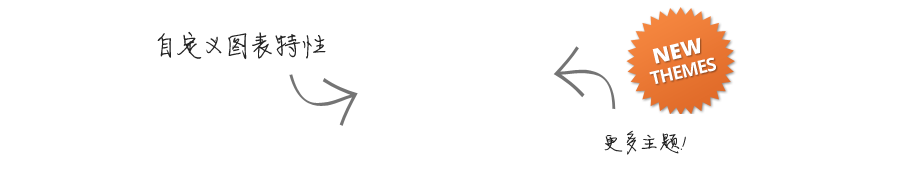
<style>
.page{position:relative;width:900px;height:170px;background:#ffffff}
.page>*{position:absolute;margin:0}
.t1{font:30px "FZJLJW--GB1-0";color:#232323}
.t2{font:24px "FZJLJW--GB1-0";color:#222222}
</style>
<div class="page">
<p class="t1" style="left:157px;top:31px;width:169px;height:29px">自定义图表特性</p>
<p class="t2" style="left:604px;top:130px;width:82px;height:25px">更多主题!</p>
</div>
